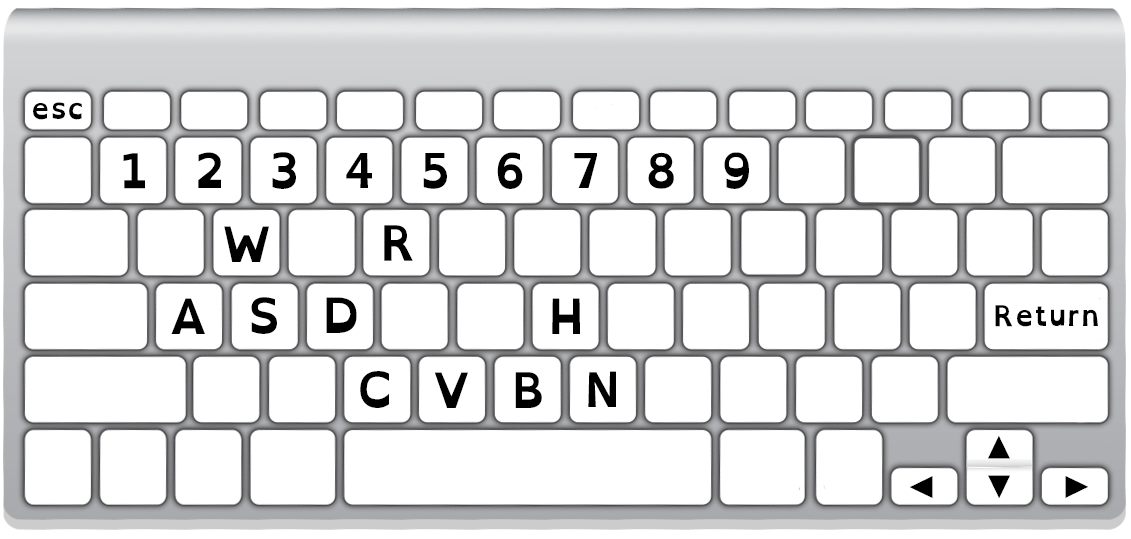
<style>
.page{position:relative;width:1131px;height:539px;background:#ffffff}
.page>*{position:absolute;margin:0}
.t1{font:28.9px "OpenDyslexic-Bold";letter-spacing:0.022em;color:#000000}
.t2{font:48.8px "OpenDyslexic-Bold";letter-spacing:0.022em;color:#000000}
.t3{font:47px "MinionPro-Regular";letter-spacing:0.022em;color:#000000}
</style>
<div class="page">
<p class="t1" style="left:33px;top:102px;width:49px;height:18px">esc</p>
<p class="t2" style="left:123px;top:153px;width:22px;height:36px">1</p>
<p class="t2" style="left:198px;top:152px;width:23px;height:36px">2</p>
<p class="t2" style="left:272px;top:152px;width:24px;height:37px">3</p>
<p class="t2" style="left:346px;top:153px;width:26px;height:35px">4</p>
<p class="t2" style="left:423px;top:153px;width:24px;height:36px">5</p>
<p class="t2" style="left:497px;top:152px;width:26px;height:37px">6</p>
<p class="t2" style="left:574px;top:153px;width:23px;height:35px">7</p>
<p class="t2" style="left:648px;top:152px;width:26px;height:37px">8</p>
<p class="t2" style="left:724px;top:152px;width:25px;height:37px">9</p>
<p class="t2" style="left:224px;top:226px;width:45px;height:36px">W</p>
<p class="t2" style="left:384px;top:225px;width:29px;height:36px">R</p>
<p class="t2" style="left:171px;top:298px;width:34px;height:36px">A</p>
<p class="t2" style="left:251px;top:297px;width:26px;height:37px">S</p>
<p class="t2" style="left:326px;top:297px;width:31px;height:36px">D</p>
<p class="t2" style="left:552px;top:298px;width:28px;height:36px">H</p>
<p class="t1" style="left:995px;top:305px;width:103px;height:22px">Return</p>
<p class="t2" style="left:360px;top:371px;width:29px;height:37px">C</p>
<p class="t2" style="left:434px;top:372px;width:34px;height:36px">V</p>
<p class="t2" style="left:515px;top:372px;width:27px;height:36px">B</p>
<p class="t2" style="left:588px;top:371px;width:28px;height:36px">N</p>
<p class="t3" style="left:988px;top:435px;width:22px;height:24px;rotate:-90deg">▶</p>
<p class="t3" style="left:909px;top:476px;width:24px;height:22px;rotate:180deg">▶</p>
<p class="t3" style="left:988px;top:475px;width:22px;height:24px;rotate:90deg">▶</p>
<p class="t3" style="left:1065px;top:476px;width:24px;height:22px">▶</p>
</div>
